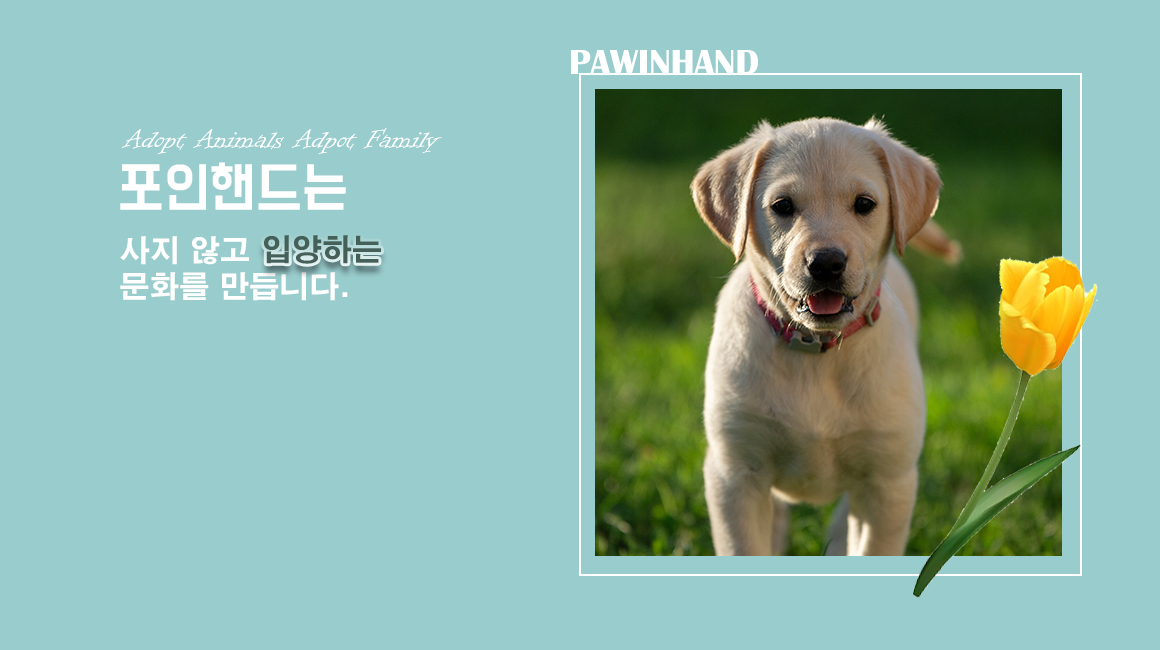
<style>
.page{position:relative;width:1160px;height:650px;background:#99cccc}
.page>*{position:absolute;margin:0}
.t1{font:36px "BritannicBold";color:#ffffff}
.t2{font:30px "InformalRoman-Regular";color:#ffffff}
.t3{font:48px "BMDoHyeon";color:#ffffff}
.t4{font:30px "H2gtrE";color:#ffffff}
.t5{font:30px "H2gtrE";color:#456058}
</style>
<div class="page">
<p class="t1" style="left:571px;top:50px;width:187px;height:24px">PAWINHAND</p>
<p class="t2" style="left:121px;top:128px;width:321px;height:27px">Adopt Animals Adpot Family</p>
<p class="t3" style="left:120px;top:162px;width:226px;height:48px">포인핸드는</p>
<p class="t4" style="left:120px;top:236px;width:228px;height:65px;text-align:center">사지 않고<br>          문화를 만듭니다.</p>
<p class="t5" style="left:264px;top:235px;width:117px;height:29px">입양하는</p>
</div>
